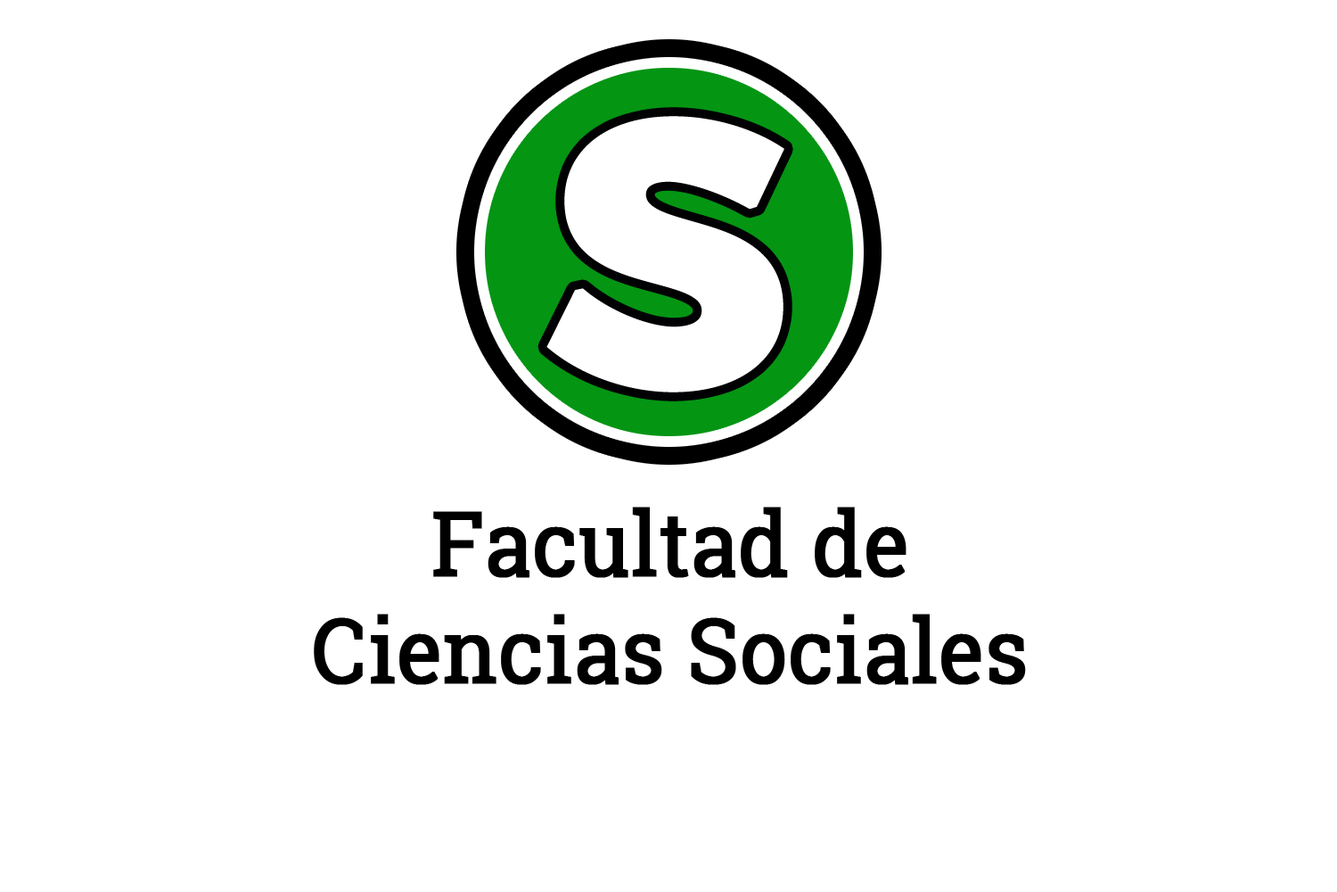
<style>
.page{position:relative;width:1337px;height:892px;background:#ffffff}
.page>*{position:absolute;margin:0}
.t1{font:371.5px "Montserrat-Bold";letter-spacing:0.009em;color:#ffffff;font-weight:bold}
.t2{font:89.2px "RobotoSlab-Regular";letter-spacing:-0.011em;color:#000000;font-weight:bold;scale:0.94 1}
</style>
<div class="page">
<p class="t1" style="left:547px;top:116px;width:238px;height:276px">S</p>
<p class="t2" style="left:314px;top:506px;width:712px;height:179px;text-align:center">Facultad de<br>Ciencias Sociales</p>
</div>
